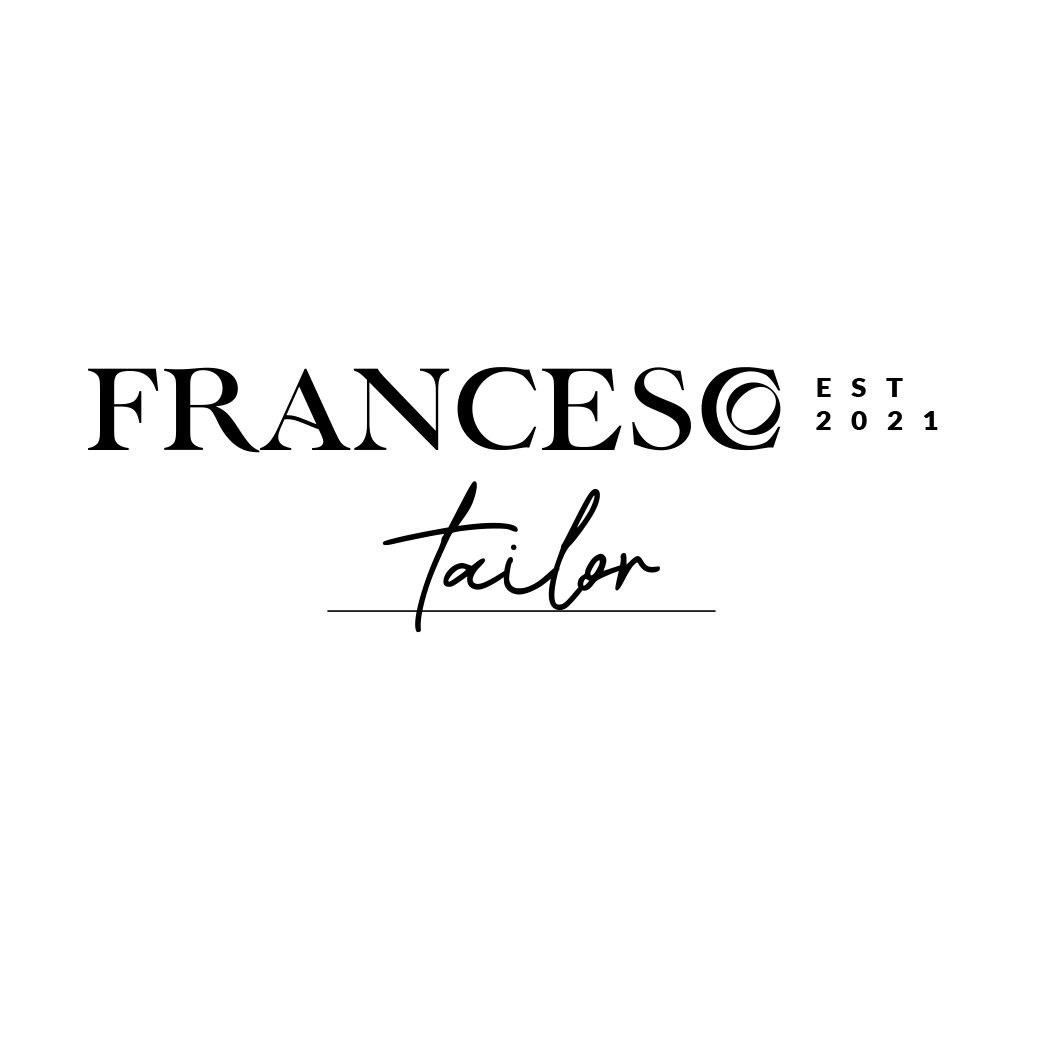
<style>
.page{position:relative;width:1043px;height:1042px;background:#ffffff}
.page>*{position:absolute;margin:0}
.t1{font:116.4px "LorettoRegular";color:#000000;text-transform:uppercase}
.t2{font:27.3px "Lato-Black";letter-spacing:0.7em;color:#000000;text-transform:uppercase}
.t3{font:138.3px "BestermindRegular";color:#000000}
</style>
<div class="page">
<p class="t1" style="left:88px;top:367px;width:693px;height:86px">Francesco</p>
<p class="t2" style="left:816px;top:378px;width:122px;height:52px">EST<br>2021</p>
<p class="t3" style="left:382px;top:481px;width:278px;height:152px">tailor</p>
</div>
